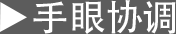
<style>
.page{position:relative;width:176px;height:34px;background:#5c5c5c}
.page>*{position:absolute;margin:0}
.t1{font:36.6px "AdobeHeitiStd-Regular";color:#ffffff}
</style>
<div class="page">
<p class="t1" style="left:33px;top:0px;width:143px;height:35px">手眼协调</p>
</div>
